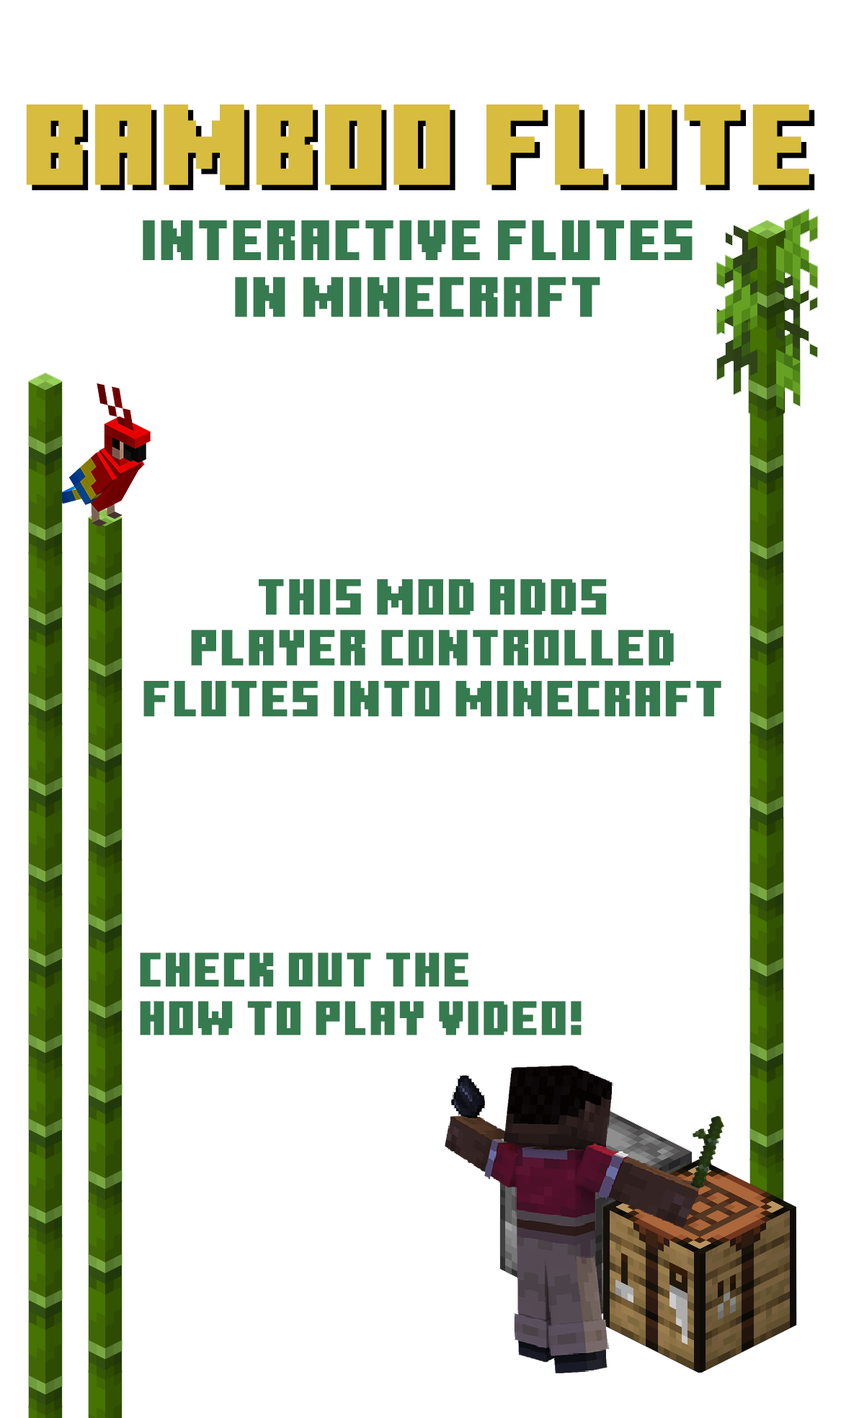
<style>
.page{position:relative;width:841px;height:1418px;background:#ffffff}
.page>*{position:absolute;margin:0}
.t1{font:114.4px "MinecraftTen";letter-spacing:0.01em;color:#d8bc3f}
.t2{font:56.8px/56.8px "MinecraftTen";letter-spacing:0.01em;color:#367a4f}
.t3{font:50.8px/50.8px "MinecraftTen";letter-spacing:0.01em;color:#367a4f}
.t4{font:48.4px/48.4px "MinecraftTen";letter-spacing:0.01em;color:#367a4f}
</style>
<div class="page">
<p class="t1" style="left:26px;top:104px;width:783px;height:81px">BAMBOO FLUTE</p>
<p class="t1" style="left:32px;top:110px;width:783px;height:80px">BAMBOO FLUTE</p>
<p class="t2" style="left:143px;top:220px;width:549px;height:97px;text-align:center">Interactive flutes<br>in Minecraft</p>
<p class="t3" style="left:143px;top:579px;width:578px;height:138px;text-align:center">This mod adds<br>player controlled<br>flutes into Minecraft</p>
<p class="t4" style="left:140px;top:953px;width:441px;height:82px">Check out the <br>how to play video!</p>
</div>
